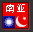
<style>
.page{position:relative;width:33px;height:32px;background:#333333}
.page>*{position:absolute;margin:0}
.t1{font:10.4px "SimSun";color:#ffffff}
</style>
<div class="page">
<p class="t1" style="left:6px;top:4px;width:19px;height:9px">南亚</p>
</div>
